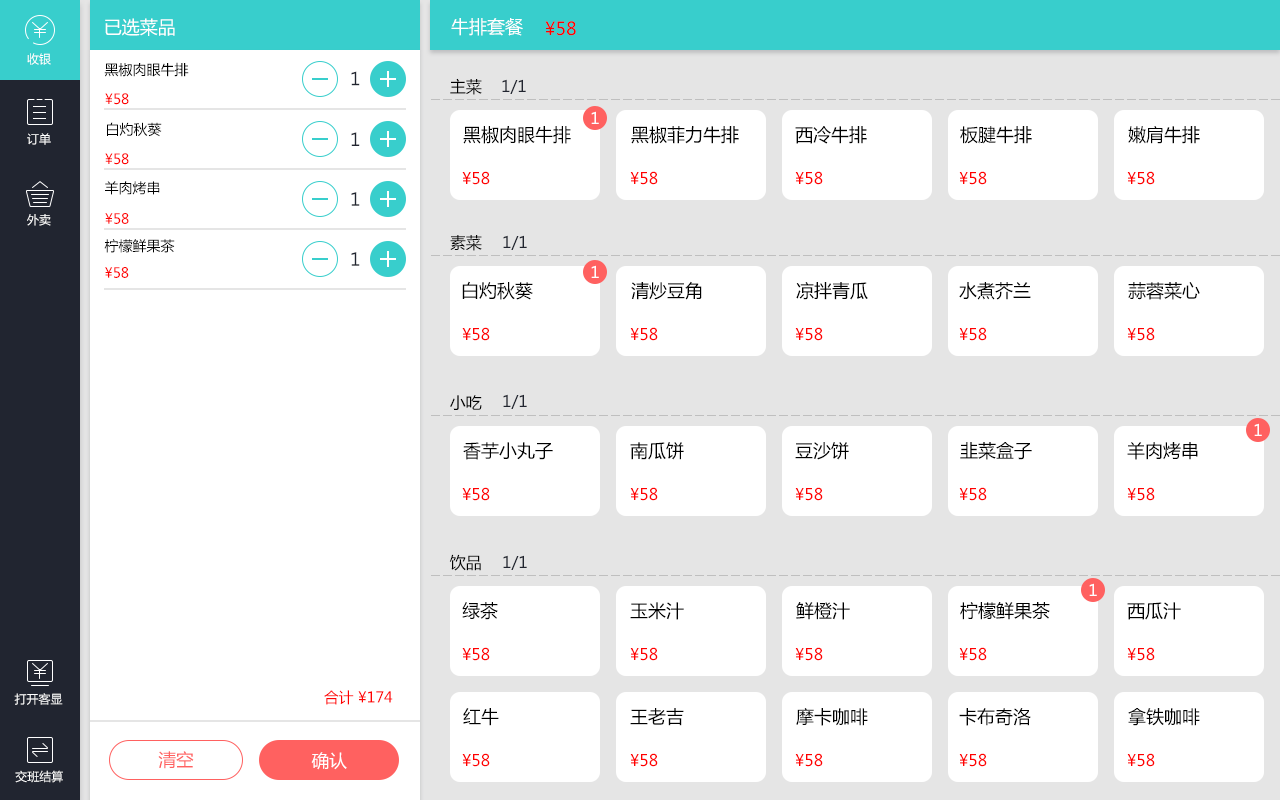
<style>
.page{position:relative;width:1280px;height:800px;background:#ffffff}
.page>*{position:absolute;margin:0}
.t1{font:18px "MicrosoftYaHei";color:#ffffff}
.t2{font:18px "MicrosoftYaHei";color:#ff0000}
.t3{font:12px "MicrosoftYaHei";color:#ffffff}
.t4{font:14px "MicrosoftYaHei";color:#000000}
.t5{font:17.8px "MicrosoftYaHei";color:#212530}
.t6{font:16px "MicrosoftYaHei";color:#000000}
.t7{font:16px "MicrosoftYaHei";color:#212530}
.t8{font:14px "MicrosoftYaHei";color:#ff0000}
.t9{font:16px "MicrosoftYaHei";color:#ffffff}
.t10{font:18px "MicrosoftYaHei";color:#000000}
.t11{font:16px "MicrosoftYaHei";color:#ff0000}
.t12{font:14.8px "MicrosoftYaHei";color:#ff0000}
.t13{font:17.8px "MicrosoftYaHei";color:#ff6160}
.t14{font:17.8px "MicrosoftYaHei";color:#ffffff}
</style>
<div class="page">
<p class="t1" style="left:105px;top:18px;width:70px;height:18px">已选菜品</p>
<p class="t1" style="left:451px;top:18px;width:72px;height:18px">牛排套餐</p>
<p class="t2" style="left:545px;top:21px;width:31px;height:15px">¥58</p>
<p class="t3" style="left:27px;top:53px;width:24px;height:12px">收银</p>
<p class="t4" style="left:104px;top:62px;width:85px;height:15px">黑椒肉眼牛排</p>
<p class="t5" style="left:351px;top:71px;width:9px;height:15px">1</p>
<p class="t6" style="left:450px;top:78px;width:32px;height:17px">主菜</p>
<p class="t7" style="left:502px;top:79px;width:24px;height:15px">1/1</p>
<p class="t8" style="left:105px;top:93px;width:24px;height:12px">¥58</p>
<p class="t9" style="left:591px;top:111px;width:8px;height:13px">1</p>
<p class="t4" style="left:107px;top:122px;width:55px;height:15px">白灼秋葵</p>
<p class="t10" style="left:463px;top:126px;width:108px;height:18px">黑椒肉眼牛排</p>
<p class="t10" style="left:631px;top:126px;width:108px;height:18px">黑椒菲力牛排</p>
<p class="t10" style="left:795px;top:126px;width:72px;height:18px">西冷牛排</p>
<p class="t10" style="left:960px;top:126px;width:72px;height:18px">板腱牛排</p>
<p class="t10" style="left:1128px;top:126px;width:72px;height:18px">嫩肩牛排</p>
<p class="t3" style="left:27px;top:133px;width:24px;height:12px">订单</p>
<p class="t5" style="left:351px;top:132px;width:9px;height:14px">1</p>
<p class="t8" style="left:105px;top:153px;width:24px;height:12px">¥58</p>
<p class="t11" style="left:462px;top:171px;width:28px;height:14px">¥58</p>
<p class="t11" style="left:630px;top:171px;width:28px;height:14px">¥58</p>
<p class="t11" style="left:795px;top:171px;width:28px;height:14px">¥58</p>
<p class="t11" style="left:959px;top:171px;width:28px;height:14px">¥58</p>
<p class="t11" style="left:1127px;top:171px;width:28px;height:14px">¥58</p>
<p class="t4" style="left:105px;top:181px;width:55px;height:14px">羊肉烤串</p>
<p class="t5" style="left:351px;top:192px;width:9px;height:14px">1</p>
<p class="t3" style="left:27px;top:214px;width:24px;height:12px">外卖</p>
<p class="t8" style="left:105px;top:213px;width:24px;height:11px">¥58</p>
<p class="t4" style="left:104px;top:239px;width:71px;height:14px">柠檬鲜果茶</p>
<p class="t6" style="left:450px;top:235px;width:32px;height:16px">素菜</p>
<p class="t7" style="left:503px;top:235px;width:24px;height:15px">1/1</p>
<p class="t5" style="left:351px;top:252px;width:9px;height:14px">1</p>
<p class="t8" style="left:105px;top:267px;width:24px;height:11px">¥58</p>
<p class="t9" style="left:591px;top:265px;width:8px;height:13px">1</p>
<p class="t10" style="left:462px;top:281px;width:71px;height:19px">白灼秋葵</p>
<p class="t10" style="left:631px;top:281px;width:71px;height:19px">清炒豆角</p>
<p class="t10" style="left:796px;top:282px;width:72px;height:18px">凉拌青瓜</p>
<p class="t10" style="left:959px;top:282px;width:72px;height:18px">水煮芥兰</p>
<p class="t10" style="left:1128px;top:282px;width:72px;height:18px">蒜蓉菜心</p>
<p class="t11" style="left:462px;top:327px;width:28px;height:14px">¥58</p>
<p class="t11" style="left:630px;top:327px;width:28px;height:14px">¥58</p>
<p class="t11" style="left:795px;top:327px;width:28px;height:14px">¥58</p>
<p class="t11" style="left:959px;top:327px;width:28px;height:14px">¥58</p>
<p class="t11" style="left:1127px;top:327px;width:28px;height:14px">¥58</p>
<p class="t6" style="left:450px;top:395px;width:32px;height:15px">小吃</p>
<p class="t7" style="left:503px;top:394px;width:24px;height:15px">1/1</p>
<p class="t9" style="left:1254px;top:423px;width:8px;height:13px">1</p>
<p class="t10" style="left:463px;top:442px;width:90px;height:18px">香芋小丸子</p>
<p class="t10" style="left:630px;top:442px;width:54px;height:18px">南瓜饼</p>
<p class="t10" style="left:795px;top:442px;width:54px;height:18px">豆沙饼</p>
<p class="t10" style="left:960px;top:442px;width:72px;height:18px">韭菜盒子</p>
<p class="t10" style="left:1127px;top:442px;width:71px;height:18px">羊肉烤串</p>
<p class="t11" style="left:462px;top:487px;width:28px;height:14px">¥58</p>
<p class="t11" style="left:630px;top:487px;width:28px;height:14px">¥58</p>
<p class="t11" style="left:795px;top:487px;width:28px;height:14px">¥58</p>
<p class="t11" style="left:959px;top:487px;width:28px;height:14px">¥58</p>
<p class="t11" style="left:1127px;top:487px;width:28px;height:14px">¥58</p>
<p class="t6" style="left:449px;top:554px;width:32px;height:17px">饮品</p>
<p class="t7" style="left:503px;top:555px;width:24px;height:15px">1/1</p>
<p class="t9" style="left:1089px;top:583px;width:8px;height:13px">1</p>
<p class="t10" style="left:462px;top:602px;width:36px;height:18px">绿茶</p>
<p class="t10" style="left:630px;top:602px;width:54px;height:18px">玉米汁</p>
<p class="t10" style="left:796px;top:602px;width:54px;height:18px">鲜橙汁</p>
<p class="t10" style="left:960px;top:602px;width:90px;height:18px">柠檬鲜果茶</p>
<p class="t10" style="left:1127px;top:602px;width:54px;height:18px">西瓜汁</p>
<p class="t11" style="left:462px;top:647px;width:28px;height:14px">¥58</p>
<p class="t11" style="left:630px;top:647px;width:28px;height:14px">¥58</p>
<p class="t11" style="left:795px;top:647px;width:28px;height:14px">¥58</p>
<p class="t11" style="left:959px;top:647px;width:28px;height:14px">¥58</p>
<p class="t11" style="left:1127px;top:647px;width:28px;height:14px">¥58</p>
<p class="t3" style="left:14px;top:693px;width:49px;height:12px">打开客显</p>
<p class="t12" style="left:324px;top:690px;width:69px;height:15px">合计 ¥174</p>
<p class="t10" style="left:463px;top:708px;width:36px;height:18px">红牛</p>
<p class="t10" style="left:630px;top:708px;width:54px;height:18px">王老吉</p>
<p class="t10" style="left:796px;top:708px;width:72px;height:18px">摩卡咖啡</p>
<p class="t10" style="left:959px;top:708px;width:72px;height:18px">卡布奇洛</p>
<p class="t10" style="left:1128px;top:708px;width:72px;height:18px">拿铁咖啡</p>
<p class="t13" style="left:158px;top:751px;width:36px;height:18px">清空</p>
<p class="t14" style="left:311px;top:752px;width:36px;height:18px">确认</p>
<p class="t11" style="left:462px;top:753px;width:28px;height:14px">¥58</p>
<p class="t11" style="left:630px;top:753px;width:28px;height:14px">¥58</p>
<p class="t11" style="left:795px;top:753px;width:28px;height:14px">¥58</p>
<p class="t11" style="left:959px;top:753px;width:28px;height:14px">¥58</p>
<p class="t11" style="left:1127px;top:753px;width:28px;height:14px">¥58</p>
<p class="t3" style="left:15px;top:770px;width:48px;height:13px">交班结算</p>
</div>
